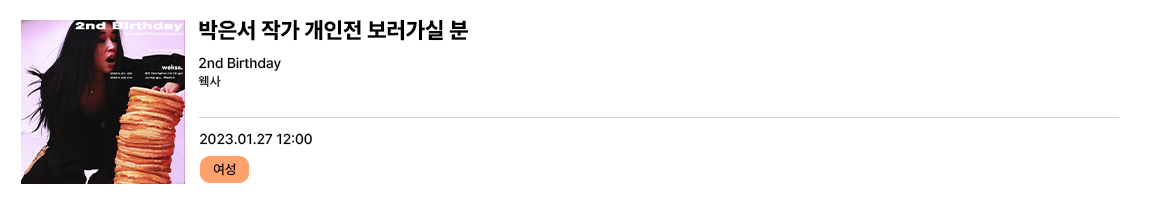
<style>
.page{position:relative;width:1150px;height:200px;background:#ffffff}
.page>*{position:absolute;margin:0}
.t1{font:22.3px "PretendardVariable-ExtraBold";color:#000000}
.t2{font:14.3px "PretendardVariable-Medium";color:#000000}
.t3{font:12.9px "PretendardVariable-Medium";color:#000000}
.t4{font:13.4px "PretendardVariable-Medium";color:#000000}
</style>
<div class="page">
<p class="t1" style="left:199px;top:19px;width:270px;height:22px">박은서 작가 개인전 보러가실 분</p>
<p class="t2" style="left:199px;top:57px;width:82px;height:14px">2nd Birthday</p>
<p class="t3" style="left:198px;top:75px;width:23px;height:13px">웩사</p>
<p class="t2" style="left:200px;top:133px;width:112px;height:12px">2023.01.27 12:00</p>
<p class="t4" style="left:213px;top:163px;width:23px;height:13px">여성</p>
</div>
